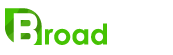
<style>
.page{position:relative;width:173px;height:55px;background:#ffffff}
.page>*{position:absolute;margin:0}
.t1{font:28.3px "CenturyGothic-Bold";color:#45c203}
.t2{font:28.3px "CenturyGothic-Bold";color:#ffffff}
</style>
<div class="page">
<p class="t1" style="left:45px;top:23px;width:126px;height:22px">road<span class="t2">Cast</span></p>
</div>
